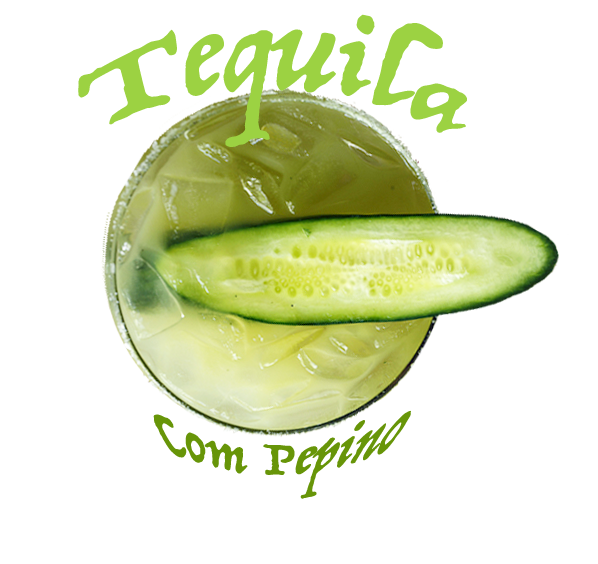
<style>
.page{position:relative;width:598px;height:564px;background:#ffffff}
.page>*{position:absolute;margin:0}
.t1{font:80px "Trattatello";color:#9cd242}
.t2{font:80px "Trattatello";color:#679508}
</style>
<div class="page">
<p class="t1" style="left:78px;top:14px;width:389px;height:133px">Tequila</p>
<p class="t2" style="left:153px;top:410px;width:258px;height:89px">Com Pepino</p>
</div>
